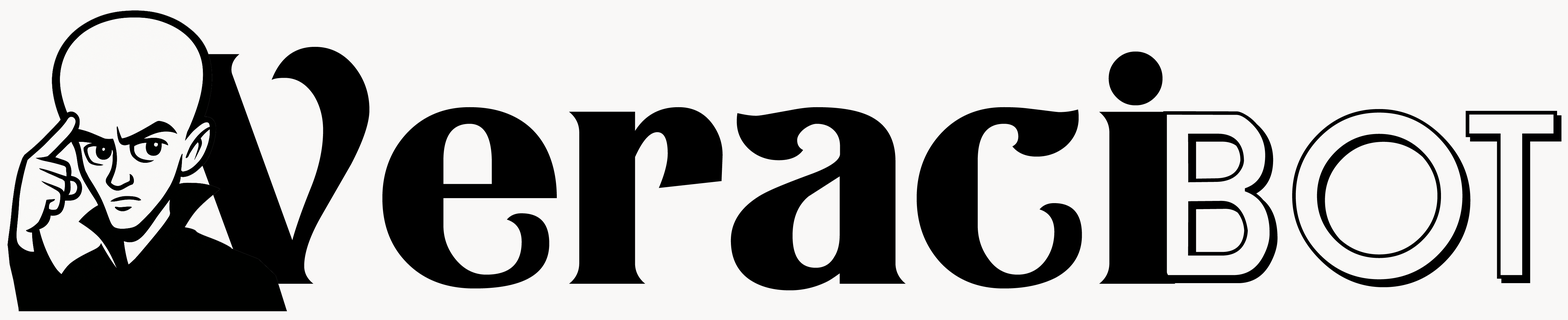
<style>
.page{position:relative;width:1568px;height:320px;background:#f9f8f7}
.page>*{position:absolute;margin:0}
.t1{font:327.7px "Klarissa";color:#000000}
.t2{font:174.8px "HonestJohnsShadow";color:#000000}
</style>
<div class="page">
<p class="t1" style="left:156px;top:47px;width:1019px;height:243px">Veraci</p>
<p class="t2" style="left:1163px;top:109px;width:398px;height:178px">BOT</p>
</div>
